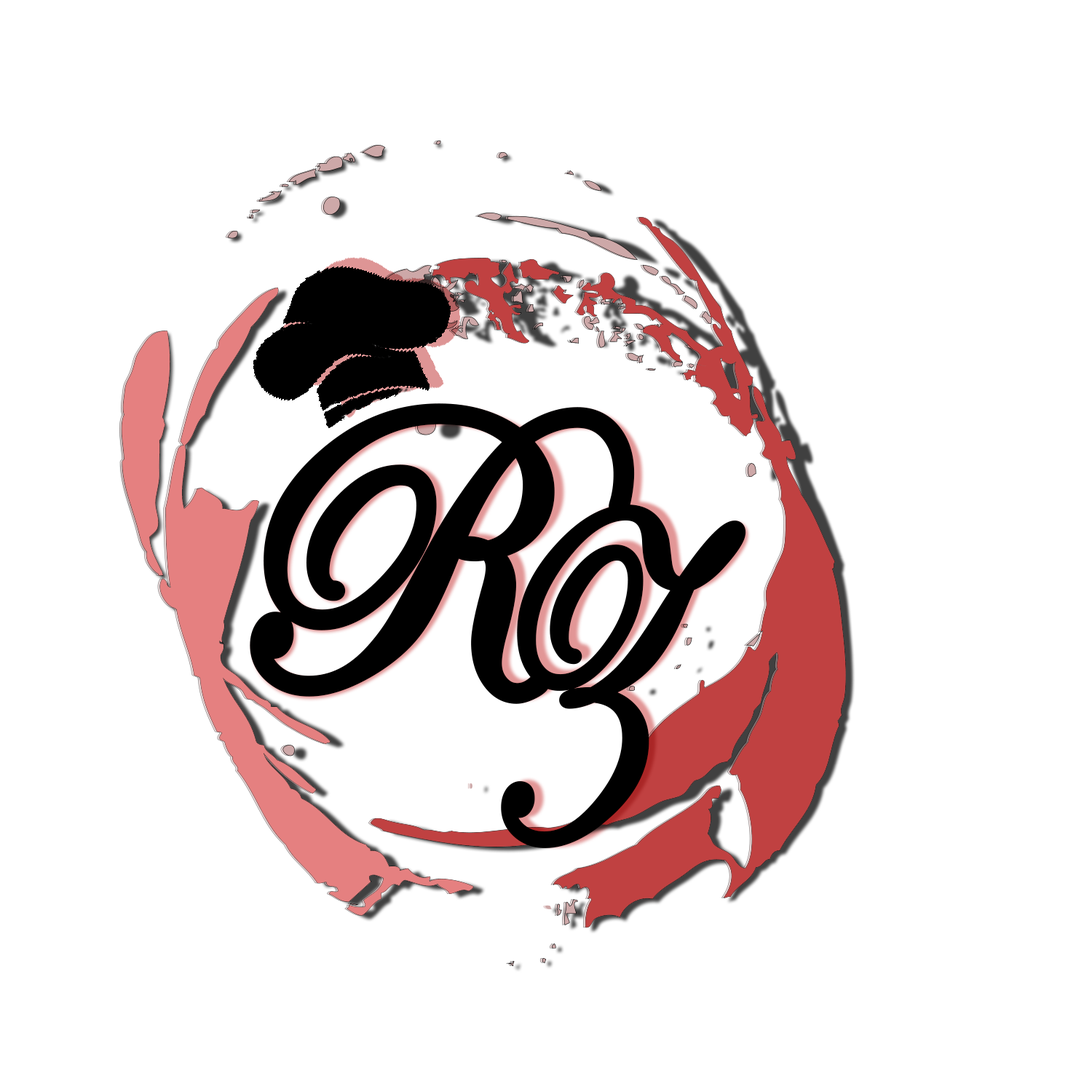
<style>
.page{position:relative;width:1092px;height:1092px;background:#ffffff}
.page>*{position:absolute;margin:0}
.t1{font:405.8px "EdwardianScriptITC";color:#000000;text-transform:uppercase;font-weight:bold;scale:0.82 1}
.t2{font:330.9px "EdwardianScriptITC";color:#000000;text-transform:uppercase;font-weight:bold;scale:0.78 1}
</style>
<div class="page">
<p class="t1" style="left:250px;top:403px;width:385px;height:301px">R</p>
<p class="t2" style="left:501px;top:504px;width:245px;height:344px">Z</p>
</div>
